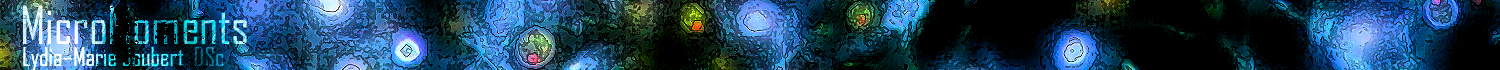
<style>
.page{position:relative;width:1500px;height:70px;background:#000000}
.page>*{position:absolute;margin:0}
.t1{font:50px "AgencyFB-Reg"}
.t2{font:25px "AgencyFB-Reg"}
</style>
<div class="page">
<p class="t1" style="left:23px;top:5px;width:224px;height:39px">MicroMoments</p>
<p class="t1" style="left:23px;top:5px;width:224px;height:39px">MicroMoments</p>
<p class="t2" style="left:23px;top:46px;width:161px;height:25px">Lydia–Marie Joubert</p>
<p class="t2" style="left:23px;top:46px;width:201px;height:25px">Lydia–Marie Joubert  DSc</p>
</div>
